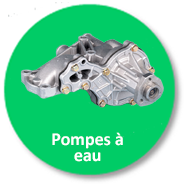
<style>
.page{position:relative;width:185px;height:185px;background:#00cc66}
.page>*{position:absolute;margin:0}
.t1{font:18px/16px "Calibri-Bold";color:#ffffff}
</style>
<div class="page">
<p class="t1" style="left:52px;top:132px;width:71px;height:30px;text-align:center">Pompes à <br>eau</p>
</div>
